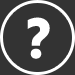
<style>
.page{position:relative;width:75px;height:75px;background:#333333}
.page>*{position:absolute;margin:0}
.t1{font:55.3px "Brother-1816-ExtraBold";letter-spacing:0.05em;color:#ffffff}
</style>
<div class="page">
<p class="t1" style="left:27px;top:17px;width:23px;height:42px">?</p>
</div>
